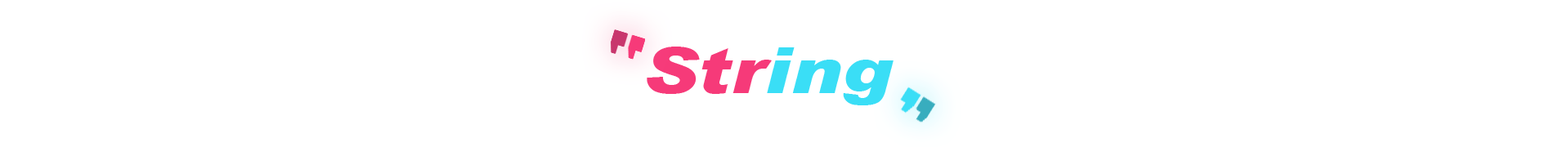
<style>
.page{position:relative;width:1568px;height:147px;background:#ffffff}
.page>*{position:absolute;margin:0}
.t1{font:63.7px "Arial-BlackItalic";color:#f63a79;scale:1.2 1}
.t2{font:63.7px "Arial-BlackItalic";color:#3adef6;scale:1.2 1}
</style>
<div class="page">
<p class="t1" style="left:647px;top:47px;width:247px;height:58px">Str<span class="t2">ing</span></p>
</div>
